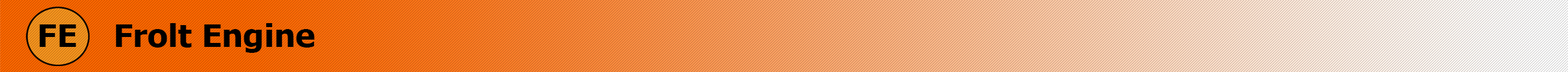
<style>
.page{position:relative;width:1568px;height:72px}
.page>*{position:absolute;margin:0}
.t1{font:31.3px "Tahoma-Bold";color:#000000;scale:1.06 1}
</style>
<div class="page">
<p class="t1" style="left:39px;top:25px;width:37px;height:22px">FE</p>
<p class="t1" style="left:116px;top:23px;width:199px;height:30px">Frolt Engine</p>
</div>
